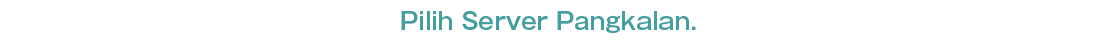
<style>
.page{position:relative;width:1097px;height:45px;background:#ffffff}
.page>*{position:absolute;margin:0}
.t1{font:23px "GothicMB101Pro-DeBold";color:#459e9f}
</style>
<div class="page">
<p class="t1" style="left:401px;top:11px;width:295px;height:22px">Pilih Server Pangkalan.</p>
</div>
